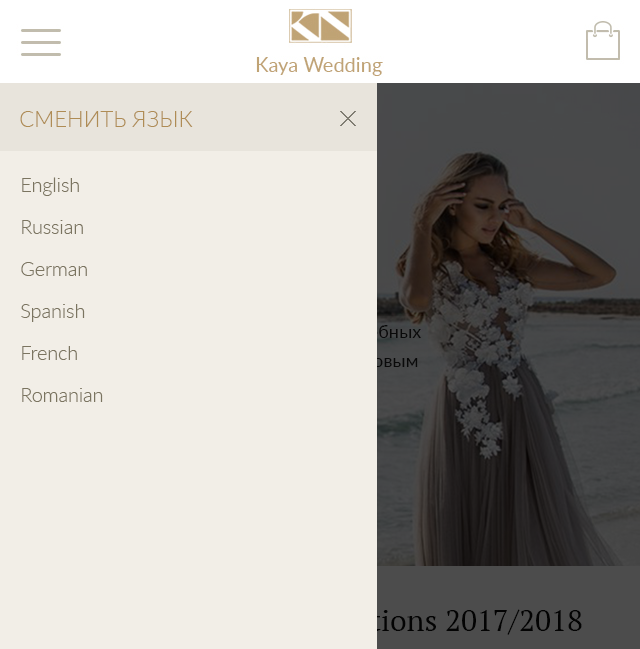
<style>
.page{position:relative;width:640px;height:649px;background:#f2eee7}
.page>*{position:absolute;margin:0}
.t1{font:22px "Lato-Light";color:#af8c55;text-transform:uppercase}
.t2{font:20px/42px "Lato-Light";color:#7b7460}
</style>
<div class="page">
<p class="t1" style="left:20px;top:111px;width:173px;height:16px">Сменить язык</p>
<p class="t2" style="left:21px;top:177px;width:82px;height:225px">English<br>Russian<br>German<br>Spanish<br>French<br>Romanian</p>
</div>
